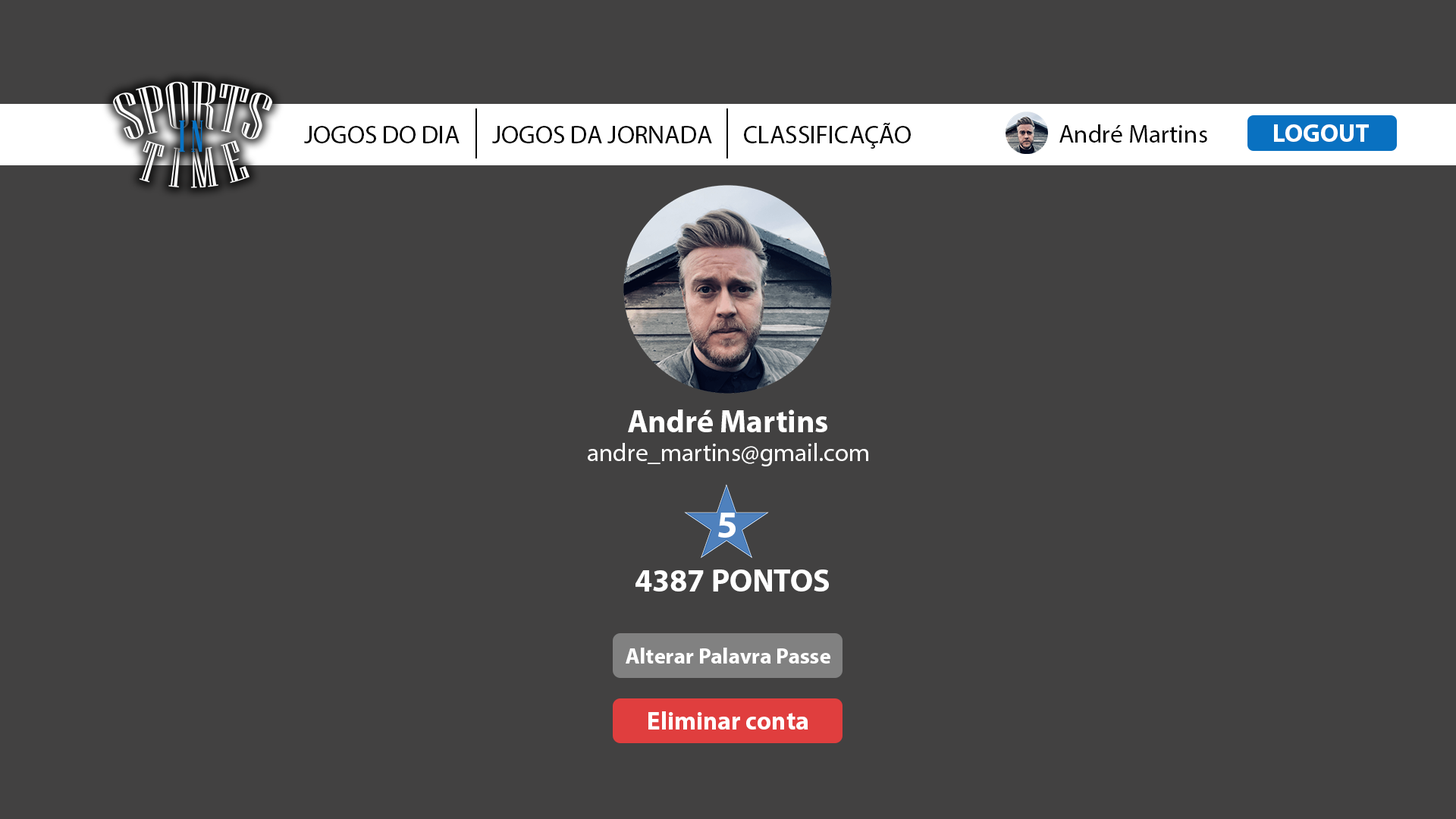
<style>
.page{position:relative;width:1456px;height:819px;background:#424141}
.page>*{position:absolute;margin:0}
.t1{font:25.3px "MyriadPro-Regular";color:#000000}
.t2{font:31.6px "MyriadPro-Bold";color:#ffffff}
.t3{font:25.3px "MyriadPro-Regular";color:#ffffff}
.t4{font:22.1px "MyriadPro-Bold";color:#ffffff}
.t5{font:25.3px "MyriadPro-Bold";color:#ffffff}
</style>
<div class="page">
<p class="t1" style="left:304px;top:126px;width:156px;height:17px">JOGOS DO DIA</p>
<p class="t1" style="left:492px;top:126px;width:220px;height:17px">JOGOS DA JORNADA</p>
<p class="t1" style="left:744px;top:122px;width:167px;height:27px">CLASSIFICAÇÃO</p>
<p class="t1" style="left:1059px;top:124px;width:148px;height:19px">André Martins</p>
<p class="t2" style="left:628px;top:409px;width:199px;height:23px">André Martins</p>
<p class="t3" style="left:588px;top:443px;width:280px;height:23px">andre_martins@gmail.com</p>
<p class="t2" style="left:635px;top:570px;width:194px;height:21px">4387 PONTOS</p>
<p class="t4" style="left:626px;top:648px;width:204px;height:16px">Alterar Palavra Passe</p>
<p class="t5" style="left:648px;top:711px;width:160px;height:19px">Eliminar conta</p>
</div>
